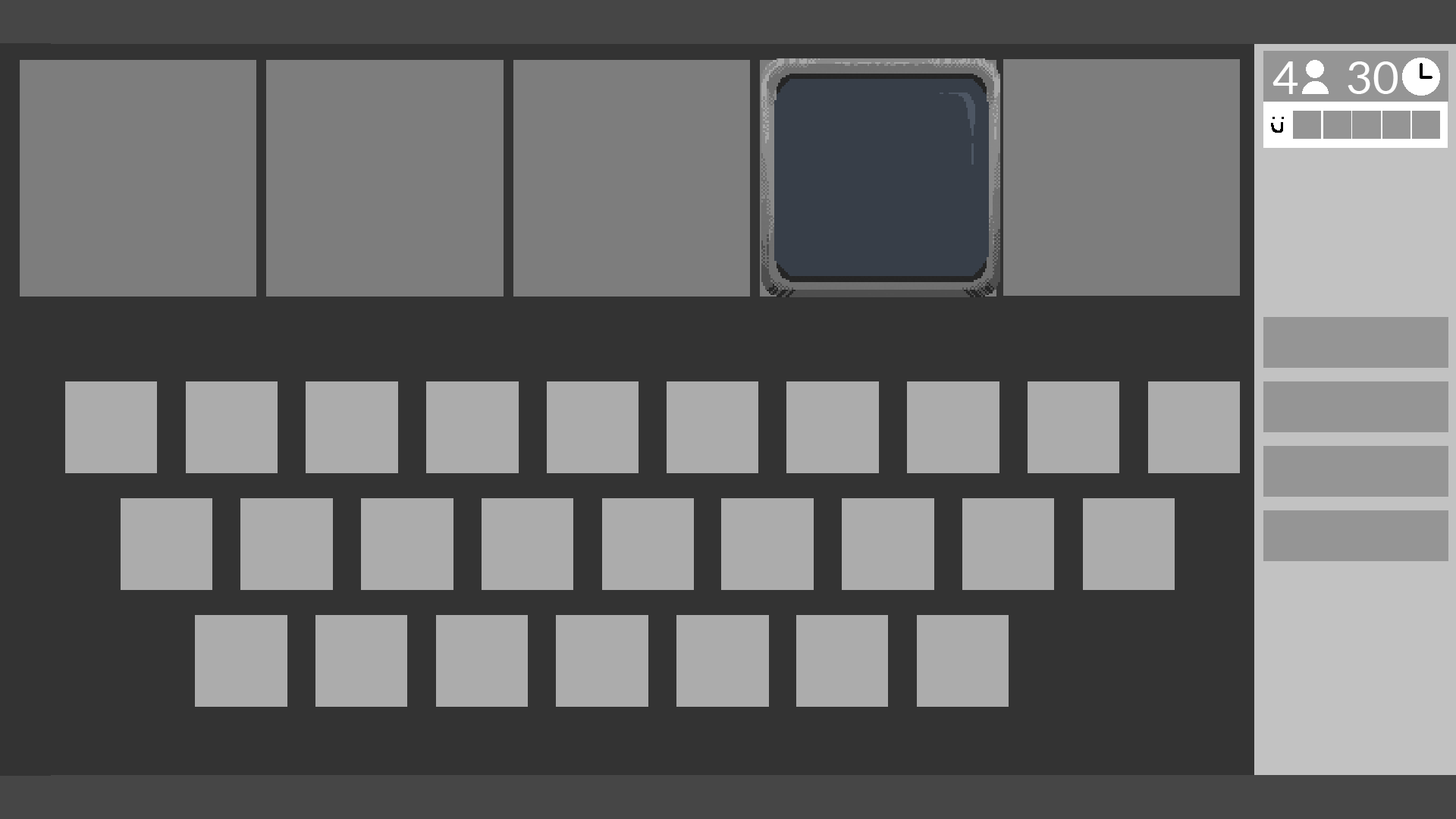
<style>
.page{position:relative;width:1456px;height:819px;background:#333333}
.page>*{position:absolute;margin:0}
.t1{font:45.5px "Lato-Regular";color:#ffffff}
</style>
<div class="page">
<p class="t1" style="left:1272px;top:61px;width:26px;height:33px">4</p>
<p class="t1" style="left:1348px;top:61px;width:50px;height:33px">30</p>
</div>
